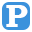
<style>
.page{position:relative;width:32px;height:32px;background:#ffffff}
.page>*{position:absolute;margin:0}
.t1{font:32px "BookmanOldStyle-Bold";color:#ffffff;scale:1.07 1}
</style>
<div class="page">
<p class="t1" style="left:6px;top:5px;width:22px;height:22px">P</p>
</div>
